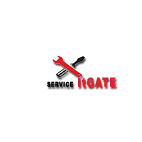
<style>
.page{position:relative;width:142px;height:142px;background:#ffffff}
.page>*{position:absolute;margin:0}
.t1{font:6.8px "Arial-Black";letter-spacing:0.1em;color:#000000;scale:0.71 1}
.t2{font:12.6px "Arial-Black";letter-spacing:0.1em;color:#ed1b24;scale:0.71 1}
</style>
<div class="page">
<p class="t1" style="left:47px;top:77px;width:69px;height:10px">SERVICE <span class="t2">ItGATE</span></p>
</div>
